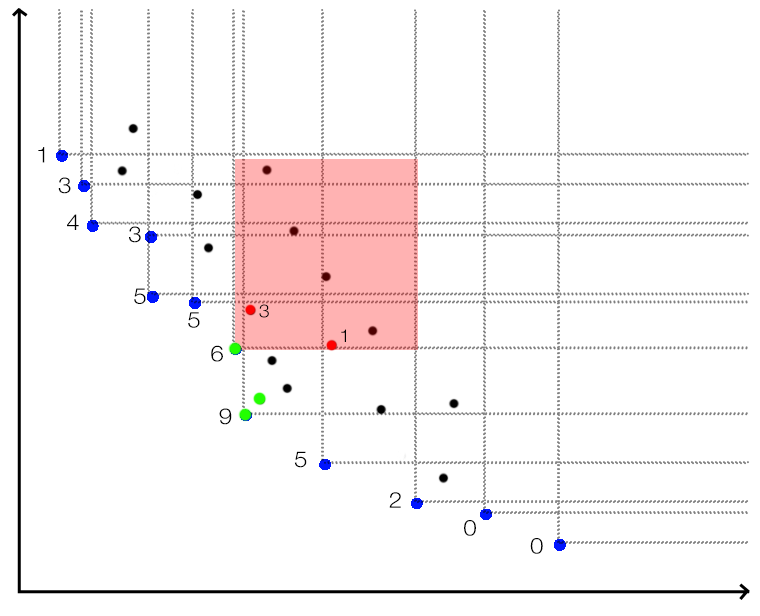
<style>
.page{position:relative;width:760px;height:616px;background:#ffffff}
.page>*{position:absolute;margin:0}
.t1{font:22px "HelveticaNeueLT-45Lt";letter-spacing:0.1em;color:#000000;scale:1.1 1}
.t2{font:18px "HelveticaNeueLT-45Lt";letter-spacing:0.1em;color:#000000;scale:1.1 1}
</style>
<div class="page">
<p class="t1" style="left:38px;top:147px;width:7px;height:16px">1</p>
<p class="t1" style="left:58px;top:177px;width:13px;height:17px">3</p>
<p class="t1" style="left:67px;top:214px;width:12px;height:16px">4</p>
<p class="t1" style="left:129px;top:226px;width:12px;height:17px">3</p>
<p class="t1" style="left:134px;top:288px;width:12px;height:16px">5</p>
<p class="t2" style="left:259px;top:304px;width:10px;height:14px">3</p>
<p class="t1" style="left:188px;top:312px;width:12px;height:16px">5</p>
<p class="t2" style="left:341px;top:329px;width:5px;height:13px">1</p>
<p class="t1" style="left:211px;top:345px;width:12px;height:17px">6</p>
<p class="t1" style="left:219px;top:408px;width:13px;height:17px">9</p>
<p class="t1" style="left:294px;top:451px;width:13px;height:17px">5</p>
<p class="t1" style="left:389px;top:492px;width:12px;height:16px">2</p>
<p class="t1" style="left:464px;top:520px;width:12px;height:16px">0</p>
<p class="t1" style="left:530px;top:538px;width:13px;height:16px">0</p>
</div>
